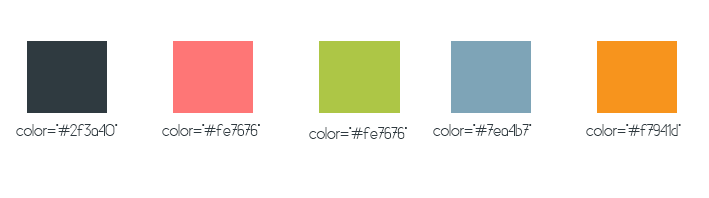
<style>
.page{position:relative;width:709px;height:198px;background:#ffffff}
.page>*{position:absolute;margin:0}
.t1{font:17px "ComunicaType";color:#2f3a40}
</style>
<div class="page">
<p class="t1" style="left:16px;top:124px;width:102px;height:12px">color="#2f3a40"</p>
<p class="t1" style="left:162px;top:124px;width:98px;height:12px">color="#fe7676"</p>
<p class="t1" style="left:433px;top:124px;width:99px;height:12px">color="#7ea4b7"</p>
<p class="t1" style="left:586px;top:124px;width:95px;height:12px">color="#f7941d"</p>
<p class="t1" style="left:309px;top:127px;width:98px;height:12px">color="#fe7676"</p>
</div>
